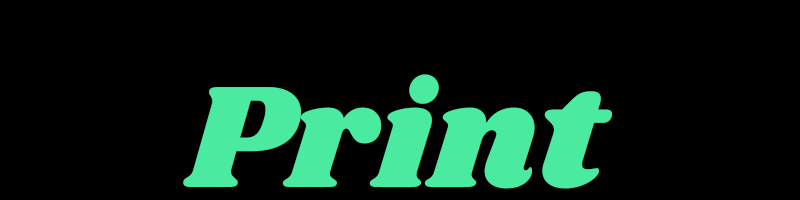
<style>
.page{position:relative;width:800px;height:200px;background:#000000}
.page>*{position:absolute;margin:0}
.t1{font:150px "Shrikhand-Regular";color:#4aeba1}
</style>
<div class="page">
<p class="t1" style="left:183px;top:74px;width:430px;height:115px">Print</p>
</div>
